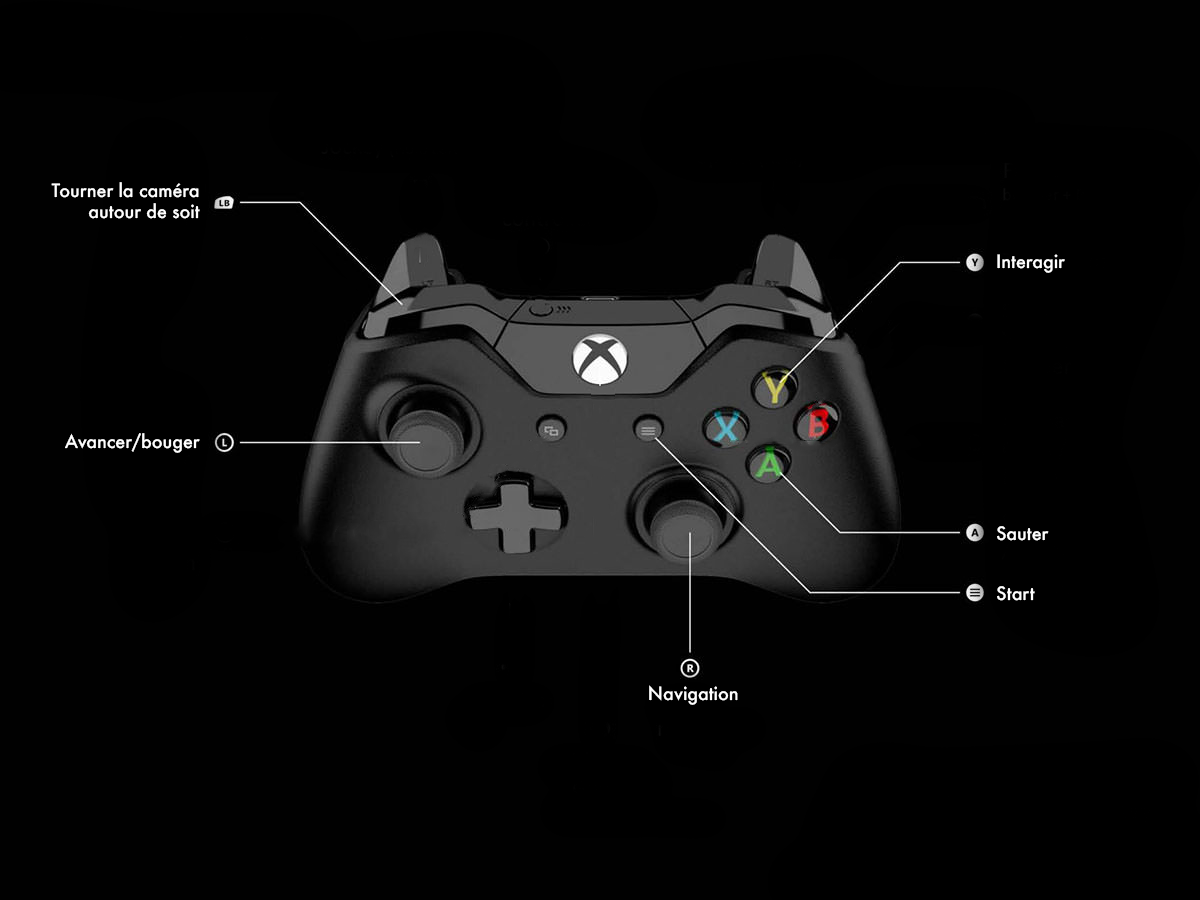
<style>
.page{position:relative;width:1200px;height:900px;background:#010101}
.page>*{position:absolute;margin:0}
.t1{font:18px "Futura-Medium";letter-spacing:-0.005em;color:#fefefe}
</style>
<div class="page">
<p class="t1" style="left:51px;top:182px;width:149px;height:37px;text-align:right">Tourner la caméra <br>autour de soit</p>
<p class="t1" style="left:997px;top:254px;width:68px;height:19px">Interagir</p>
<p class="t1" style="left:65px;top:433px;width:135px;height:20px">Avancer/bouger</p>
<p class="t1" style="left:997px;top:526px;width:52px;height:15px">Sauter</p>
<p class="t1" style="left:997px;top:586px;width:38px;height:15px">Start</p>
<p class="t1" style="left:649px;top:685px;width:89px;height:20px">Navigation</p>
</div>
